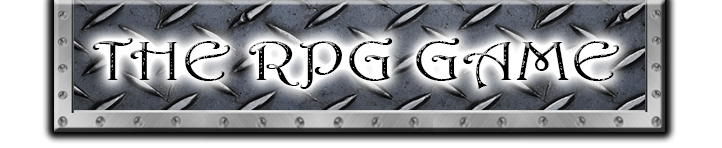
<style>
.page{position:relative;width:722px;height:148px;background:#ffffff}
.page>*{position:absolute;margin:0}
.t1{font:55.1px "Harrington";color:#000000;scale:1.31 1}
</style>
<div class="page">
<p class="t1" style="left:92px;top:38px;width:527px;height:51px">THE RPG GAME</p>
</div>
